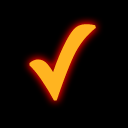
<style>
.page{position:relative;width:128px;height:128px;background:#000000}
.page>*{position:absolute;margin:0}
.t1{font:100px "LucidaGrande";color:#ffb420;font-weight:bold}
</style>
<div class="page">
<p class="t1" style="left:29px;top:24px;width:67px;height:77px">✓</p>
</div>
